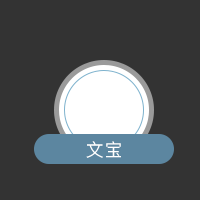
<style>
.page{position:relative;width:200px;height:200px;background:#333333}
.page>*{position:absolute;margin:0}
.t1{font:18px "PingFangSC-Regular";letter-spacing:0.04em;color:#ffffff}
</style>
<div class="page">
<p class="t1" style="left:86px;top:141px;width:35px;height:17px">文宝</p>
</div>
